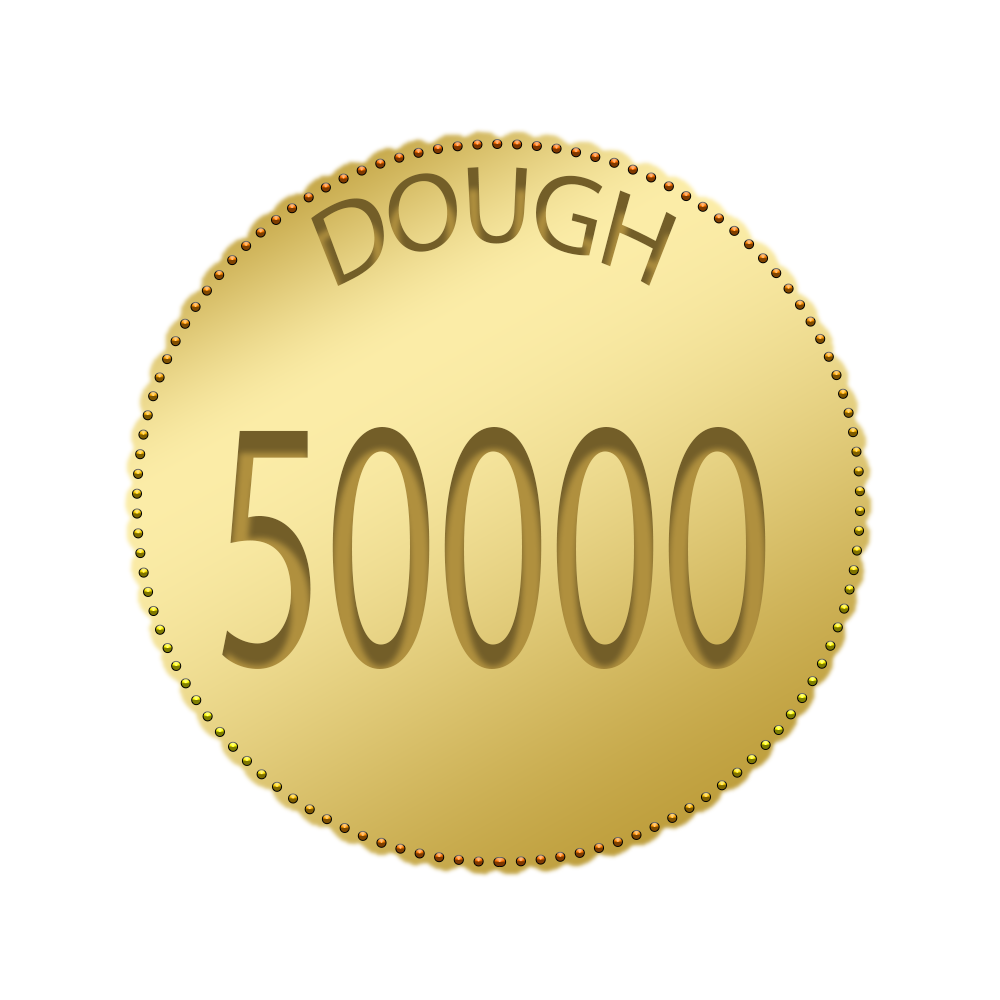
<style>
.page{position:relative;width:1000px;height:1000px;background:#ffffff}
.page>*{position:absolute;margin:0}
.t1{font:112.4px "MyriadPro-Regular";scale:0.82 1}
.t2{font:360.4px "MyriadPro-Regular";scale:0.61 1}
</style>
<div class="page">
<p class="t1" style="left:311px;top:167px;width:366px;height:119px">DOUGH</p>
<p class="t2" style="left:222px;top:427px;width:544px;height:242px">50000</p>
</div>
